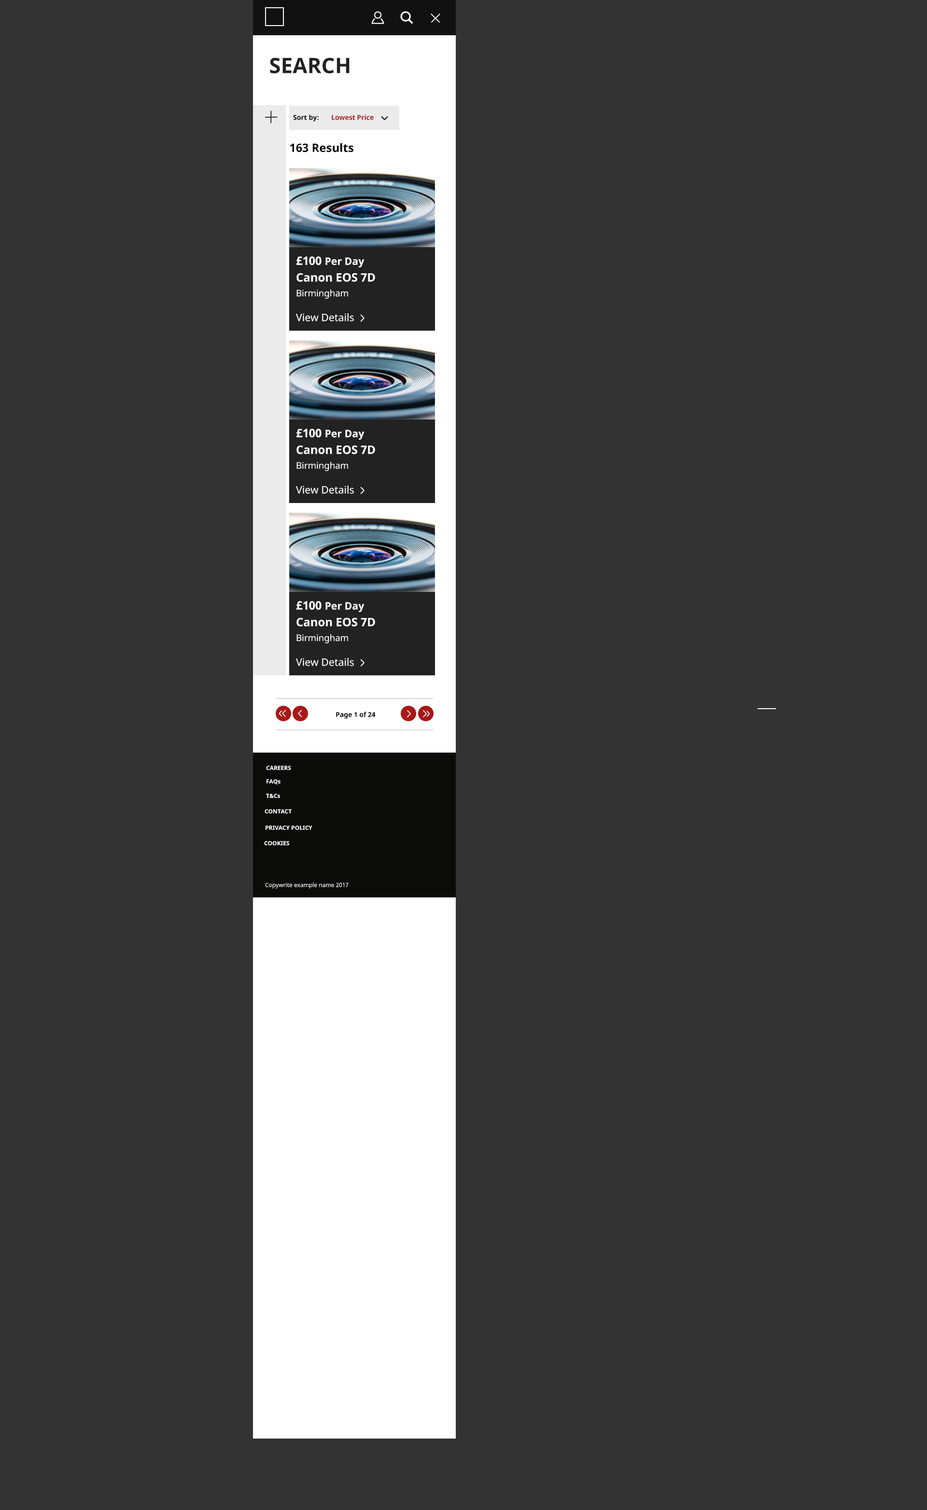
<style>
.page{position:relative;width:927px;height:1510px;background:#333333}
.page>*{position:absolute;margin:0}
.t1{font:21.2px "NotoSans-Bold";color:#222222;text-transform:uppercase}
.t2{font:6.8px "NotoSans-Bold";color:#000000}
.t3{font:6.8px "NotoSans-Bold";color:#a91717}
.t4{font:11.6px "NotoSans-Bold";color:#000000}
.t5{font:10.3px "NotoSans-Bold";color:#ffffff}
.t6{font:11.6px "NotoSans-Bold";color:#ffffff;text-transform:uppercase}
.t7{font:10.3px "NotoSans-Bold";color:#ffffff;text-transform:uppercase}
.t8{font:11.6px "NotoSans-Bold";color:#ffffff}
.t9{font:9px "NotoSans";color:#ffffff}
.t10{font:10.3px "NotoSans";color:#ffffff}
.t11{font:5.8px "NotoSans-Bold";color:#ffffff}
.t12{font:5.8px "NotoSans";color:#ffffff}
</style>
<div class="page">
<p class="t1" style="left:270px;top:57px;width:79px;height:16px">Search</p>
<p class="t2" style="left:293px;top:114px;width:26px;height:8px">Sort by:</p>
<p class="t3" style="left:332px;top:114px;width:42px;height:6px">Lowest Price</p>
<p class="t4" style="left:290px;top:143px;width:63px;height:9px">163 Results</p>
<p class="t5" style="left:296px;top:256px;width:68px;height:11px"><span class="t6">£100 </span><span class="t7">P</span>er Day</p>
<p class="t8" style="left:296px;top:273px;width:79px;height:9px">Canon EOS 7D</p>
<p class="t9" style="left:296px;top:289px;width:52px;height:10px">Birmingham</p>
<p class="t10" style="left:296px;top:313px;width:58px;height:8px">View Details</p>
<p class="t5" style="left:296px;top:429px;width:68px;height:11px"><span class="t6">£100 </span><span class="t7">P</span>er Day</p>
<p class="t8" style="left:296px;top:445px;width:79px;height:9px">Canon EOS 7D</p>
<p class="t9" style="left:296px;top:461px;width:52px;height:10px">Birmingham</p>
<p class="t10" style="left:296px;top:486px;width:58px;height:8px">View Details</p>
<p class="t5" style="left:296px;top:601px;width:68px;height:11px"><span class="t6">£100 </span><span class="t7">P</span>er Day</p>
<p class="t8" style="left:296px;top:617px;width:79px;height:9px">Canon EOS 7D</p>
<p class="t9" style="left:296px;top:634px;width:52px;height:9px">Birmingham</p>
<p class="t10" style="left:296px;top:658px;width:58px;height:8px">View Details</p>
<p class="t2" style="left:336px;top:711px;width:39px;height:8px">Page 1 of 24</p>
<p class="t11" style="left:266px;top:765px;width:25px;height:5px">CAREERS</p>
<p class="t11" style="left:266px;top:779px;width:14px;height:5px">FAQs</p>
<p class="t11" style="left:266px;top:793px;width:14px;height:5px">T&amp;Cs</p>
<p class="t11" style="left:264px;top:809px;width:28px;height:4px">CONTACT</p>
<p class="t11" style="left:265px;top:825px;width:47px;height:5px">PRIVACY POLICY</p>
<p class="t11" style="left:264px;top:841px;width:25px;height:4px">COOKIES</p>
<p class="t12" style="left:265px;top:882px;width:83px;height:7px">Copywrite example name 2017</p>
</div>
